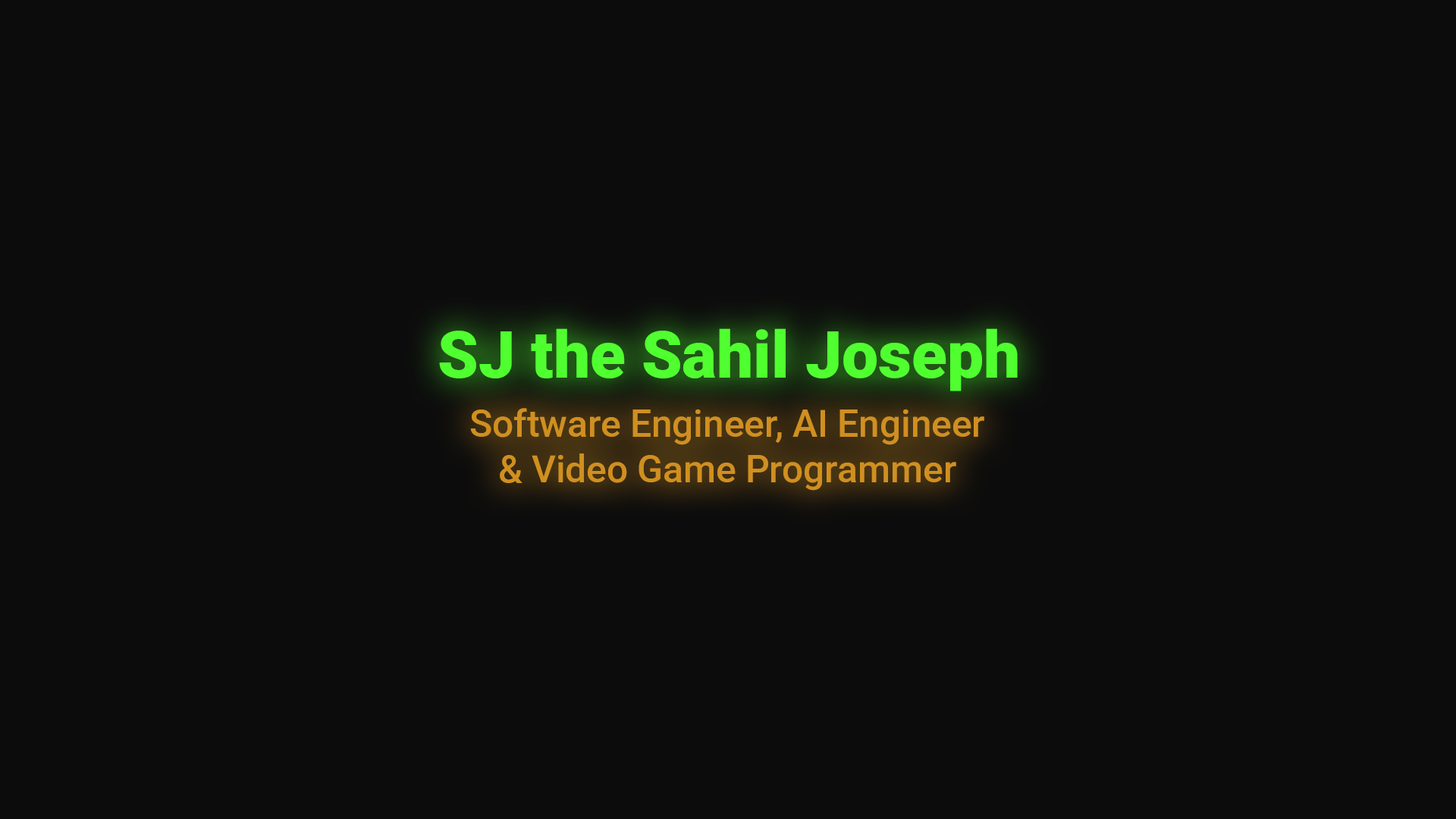
<style>
.page{position:relative;width:1456px;height:819px;background:#0c0c0c}
.page>*{position:absolute;margin:0}
.t1{font:65px "Roboto-Black";color:#50ff30}
.t2{font:37.6px "Roboto-Medium";color:#d08f20}
</style>
<div class="page">
<p class="t1" style="left:439px;top:328px;width:579px;height:63px">SJ the Sahil Joseph</p>
<p class="t2" style="left:470px;top:408px;width:514px;height:83px;text-align:center">Software Engineer, AI Engineer<br>&amp; Video Game Programmer</p>
</div>
